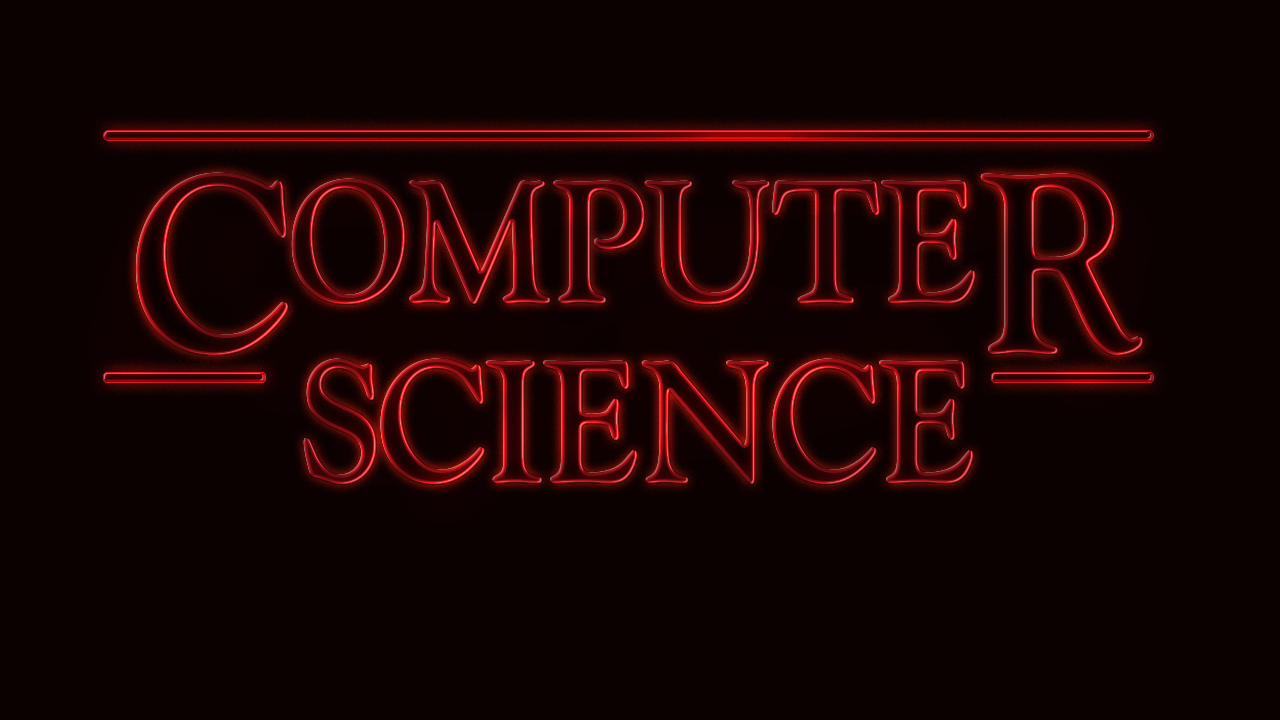
<style>
.page{position:relative;width:1280px;height:720px;background:#0c0101}
.page>*{position:absolute;margin:0}
.t1{font:172.5px "IndiraK";letter-spacing:-0.1em;scale:0.87 1}
.t2{font:253px "IndiraK";letter-spacing:-0.1em;scale:0.87 1}
</style>
<div class="page">
<p class="t1" style="left:136px;top:173px;width:1007px;height:311px;text-align:center"><span class="t2">C</span>OMPUTE<span class="t2">R<br></span>SCIENCE</p>
</div>
